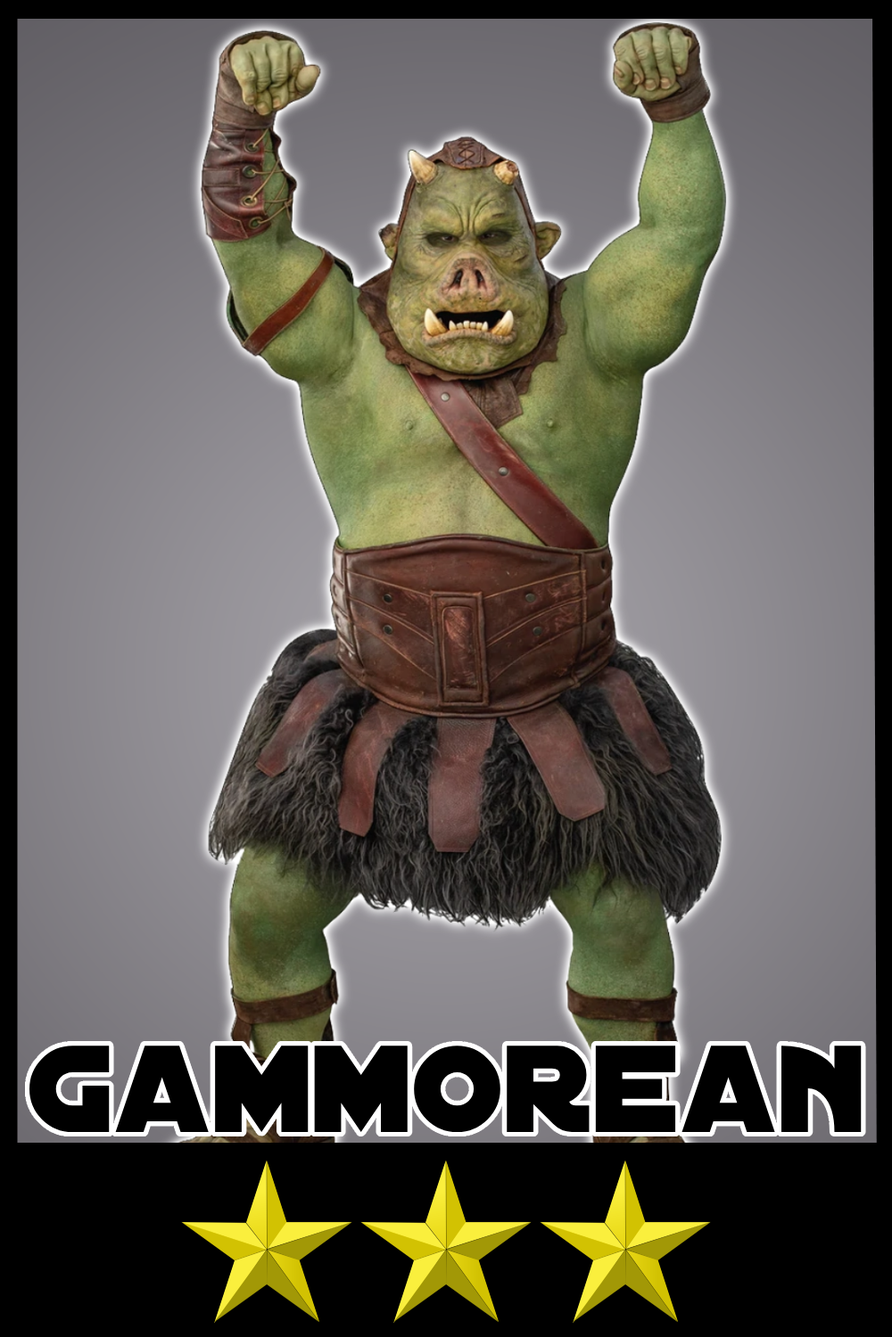
<style>
.page{position:relative;width:892px;height:1337px}
.page>*{position:absolute;margin:0}
.t1{font:132.6px "DistantGalaxy";color:#000000}
</style>
<div class="page">
<p class="t1" style="left:29px;top:1046px;width:832px;height:86px">Gammorean</p>
</div>
